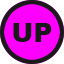
<style>
.page{position:relative;width:64px;height:64px;background:#ff00ff}
.page>*{position:absolute;margin:0}
.t1{font:26px "Arial-Black";color:#191919}
</style>
<div class="page">
<p class="t1" style="left:13px;top:23px;width:39px;height:19px">UP</p>
</div>
